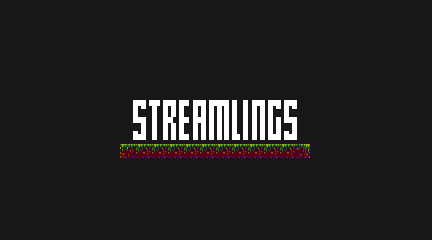
<style>
.page{position:relative;width:432px;height:240px;background:#171717}
.page>*{position:absolute;margin:0}
.t1{font:56.9px "pxlxxlcond";letter-spacing:0.02em;color:#ffffff;scale:0.88 1}
</style>
<div class="page">
<p class="t1" style="left:133px;top:100px;width:164px;height:40px">STREAMLINGS</p>
</div>
